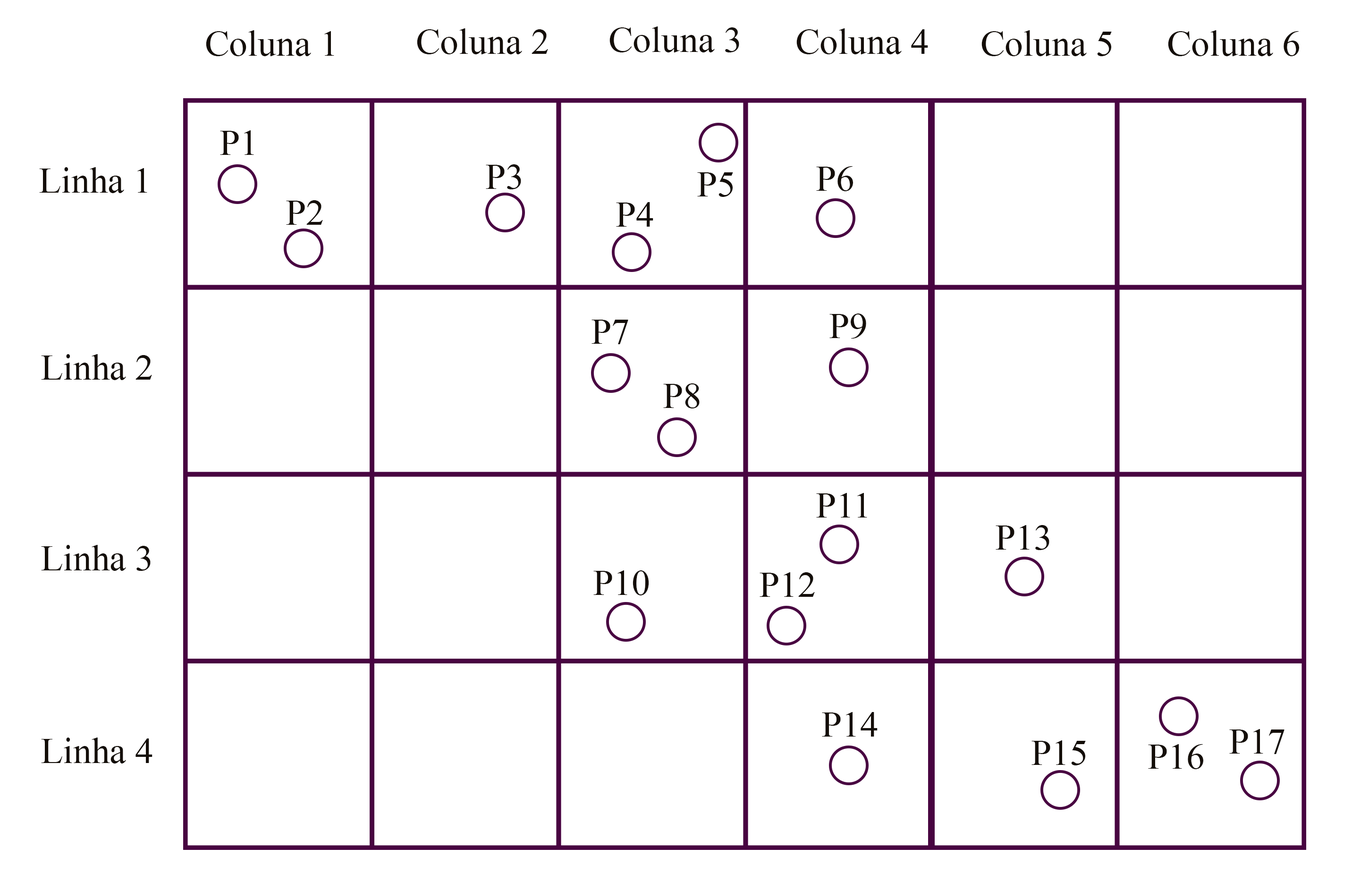
<style>
.page{position:relative;width:1352px;height:882px;background:#ffffff}
.page>*{position:absolute;margin:0}
.t1{font:36.7px "TimesNewRomanPSMT";color:#140e08}
</style>
<div class="page">
<p class="t1" style="left:417px;top:28px;width:131px;height:26px">Coluna 2</p>
<p class="t1" style="left:609px;top:26px;width:130px;height:26px">Coluna 3</p>
<p class="t1" style="left:796px;top:28px;width:132px;height:26px">Coluna 4</p>
<p class="t1" style="left:206px;top:30px;width:128px;height:26px">Coluna 1</p>
<p class="t1" style="left:982px;top:30px;width:130px;height:26px">Coluna 5</p>
<p class="t1" style="left:1168px;top:30px;width:131px;height:26px">Coluna 6</p>
<p class="t1" style="left:220px;top:130px;width:34px;height:25px">P1</p>
<p class="t1" style="left:39px;top:167px;width:108px;height:26px">Linha 1</p>
<p class="t1" style="left:486px;top:164px;width:35px;height:25px">P3</p>
<p class="t1" style="left:697px;top:172px;width:36px;height:25px">P5</p>
<p class="t1" style="left:816px;top:166px;width:37px;height:25px">P6</p>
<p class="t1" style="left:286px;top:200px;width:37px;height:25px">P2</p>
<p class="t1" style="left:616px;top:202px;width:37px;height:25px">P4</p>
<p class="t1" style="left:829px;top:313px;width:37px;height:26px">P9</p>
<p class="t1" style="left:592px;top:320px;width:36px;height:24px">P7</p>
<p class="t1" style="left:41px;top:354px;width:111px;height:26px">Linha 2</p>
<p class="t1" style="left:663px;top:383px;width:37px;height:25px">P8</p>
<p class="t1" style="left:816px;top:493px;width:51px;height:24px">P11</p>
<p class="t1" style="left:996px;top:525px;width:53px;height:25px">P13</p>
<p class="t1" style="left:41px;top:545px;width:110px;height:26px">Linha 3</p>
<p class="t1" style="left:593px;top:570px;width:56px;height:25px">P10</p>
<p class="t1" style="left:760px;top:572px;width:55px;height:25px">P12</p>
<p class="t1" style="left:822px;top:712px;width:56px;height:24px">P14</p>
<p class="t1" style="left:41px;top:737px;width:111px;height:26px">Linha 4</p>
<p class="t1" style="left:1229px;top:729px;width:56px;height:25px">P17</p>
<p class="t1" style="left:1032px;top:740px;width:54px;height:25px">P15</p>
<p class="t1" style="left:1148px;top:744px;width:55px;height:25px">P16</p>
</div>
